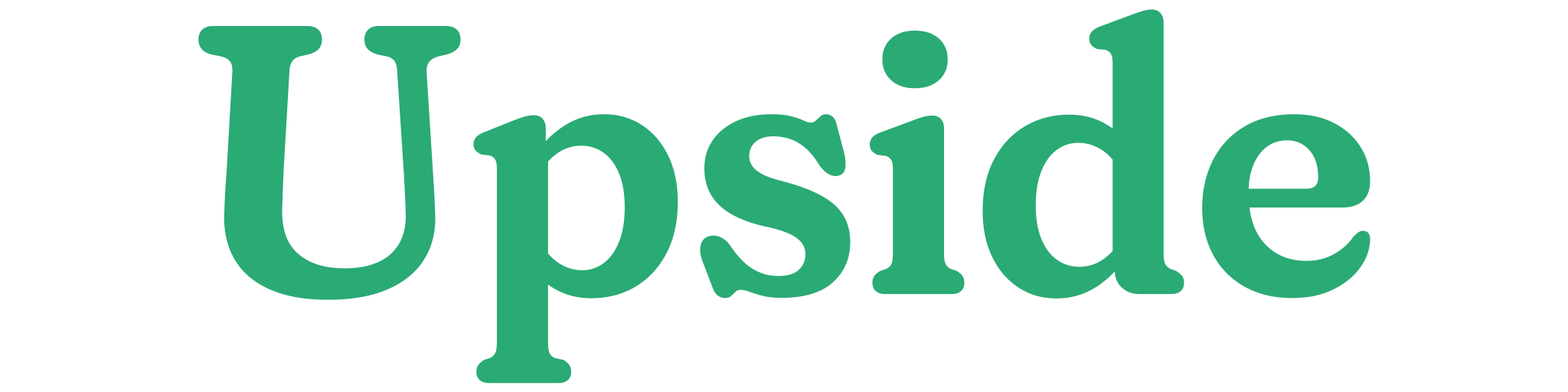
<style>
.page{position:relative;width:1568px;height:392px;background:#ffffff}
.page>*{position:absolute;margin:0}
.t1{font:382.8px "Fraunces72ptSuperSoft-SemiBold";color:#2aaa74}
</style>
<div class="page">
<p class="t1" style="left:198px;top:9px;width:1172px;height:375px">Upside</p>
</div>
